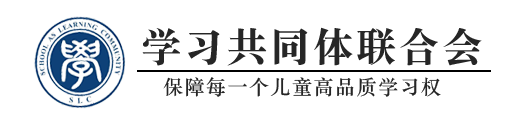
<style>
.page{position:relative;width:521px;height:120px;background:#ffffff}
.page>*{position:absolute;margin:0}
.t1{font:40px "STSongti-SC-Black";letter-spacing:0.075em;color:#262626;text-transform:uppercase}
.t2{font:20px "STSongti-SC-Bold";letter-spacing:0.075em;color:#262626;text-transform:uppercase}
</style>
<div class="page">
<p class="t1" style="left:142px;top:27px;width:340px;height:39px">学习共同体联合会</p>
<p class="t2" style="left:163px;top:77px;width:278px;height:20px">保障每一个儿童高品质学习权</p>
</div>
